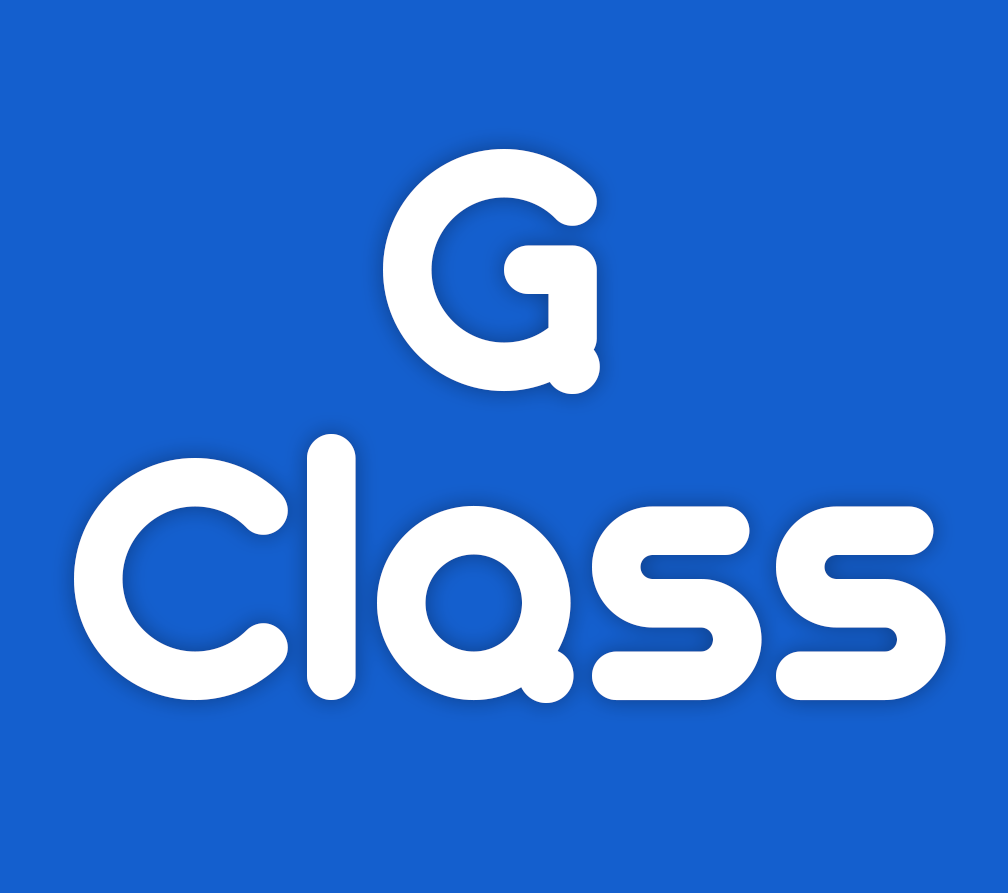
<style>
.page{position:relative;width:1008px;height:893px;background:#145fce}
.page>*{position:absolute;margin:0}
.t1{font:378.2px/103.1px "GeometrySoftPro-BoldN";color:#ffffff}
</style>
<div class="page">
<p class="t1" style="left:74px;top:149px;width:872px;height:554px">G<br>  <br><br>Class</p>
</div>
